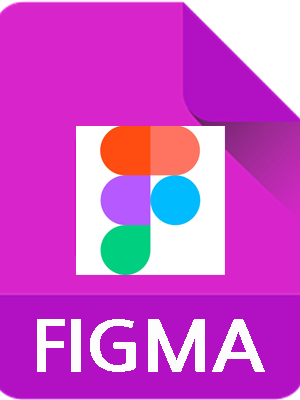
<style>
.page{position:relative;width:300px;height:400px;background:#d825cb}
.page>*{position:absolute;margin:0}
.t1{font:72px "NanumGothicExtraBold";color:#fdfdfd}
</style>
<div class="page">
<p class="t1" style="left:37px;top:319px;width:228px;height:53px">FIGMA</p>
</div>
